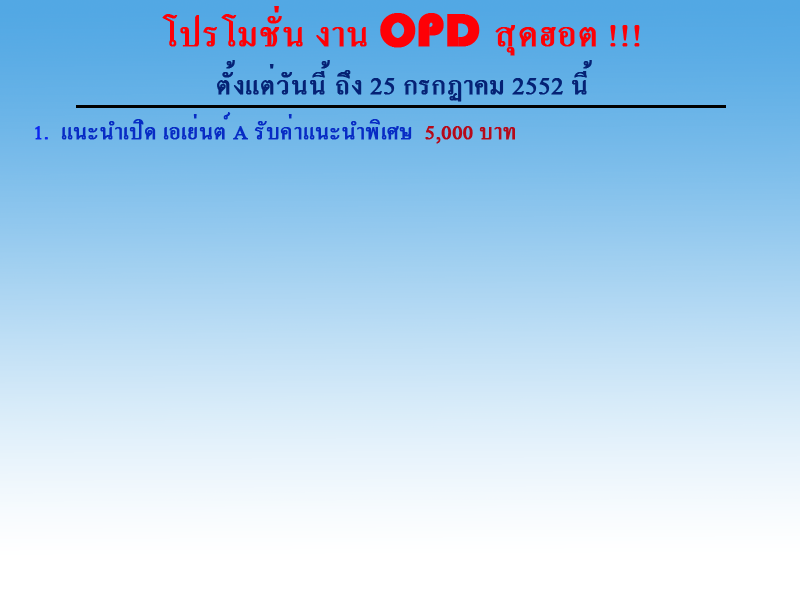
<style>
.page{position:relative;width:800px;height:600px}
.page>*{position:absolute;margin:0}
.t1{font:48px "AngsanaNew";color:#fe0006;font-weight:bold}
.t2{font:48px "Bauhaus93";color:#fe0006;font-weight:bold}
.t3{font:36px "AngsanaNew";color:#052275;font-weight:bold}
.t4{font:30px "AngsanaNew";color:#072bc4;font-weight:bold}
.t5{font:30px "AngsanaNew";color:#0c27f0;font-weight:bold}
.t6{font:30px "AngsanaNew";color:#b60919;font-weight:bold}
</style>
<div class="page">
<p class="t1" style="left:162px;top:6px;width:478px;height:50px">โปรโมชั่น งาน <span class="t2">OPD </span>สุดฮอต !!!</p>
<p class="t3" style="left:217px;top:60px;width:375px;height:42px">ตั้งแต่วันนี้ ถึง 25 กรกฏาคม 2552 นี้</p>
<p class="t4" style="left:35px;top:112px;width:480px;height:32px"><span class="t5">1.  </span>แนะนำเปิด เอเย่นต์ A รับค่าแนะนำพิเศษ  <span class="t6">5,000 บาท</span></p>
</div>
